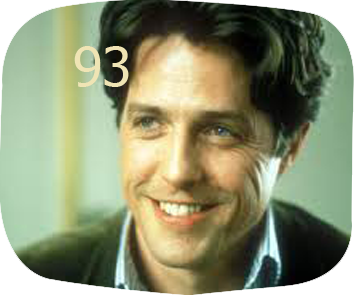
<style>
.page{position:relative;width:354px;height:295px}
.page>*{position:absolute;margin:0}
.t1{font:54px "Tahoma";color:#efe4b4}
</style>
<div class="page">
<p class="t1" style="left:74px;top:46px;width:55px;height:41px">93</p>
</div>
